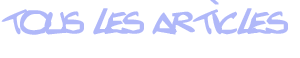
<style>
.page{position:relative;width:300px;height:58px;background:#ffffff}
.page>*{position:absolute;margin:0}
.t1{font:60px "Texted'critureLanfeust";color:#b0b8f9}
</style>
<div class="page">
<p class="t1" style="left:1px;top:0px;width:287px;height:35px">tous les articles</p>
</div>
